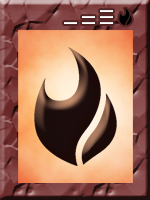
<style>
.page{position:relative;width:150px;height:200px}
.page>*{position:absolute;margin:0}
.t1{font:18px/18px "MyriadPro-Regular";letter-spacing:0.1em;color:#ffffff}
</style>
<div class="page">
<p class="t1" style="left:64px;top:10px;width:49px;height:14px;rotate:-90deg">I<br>II<br>III</p>
</div>
